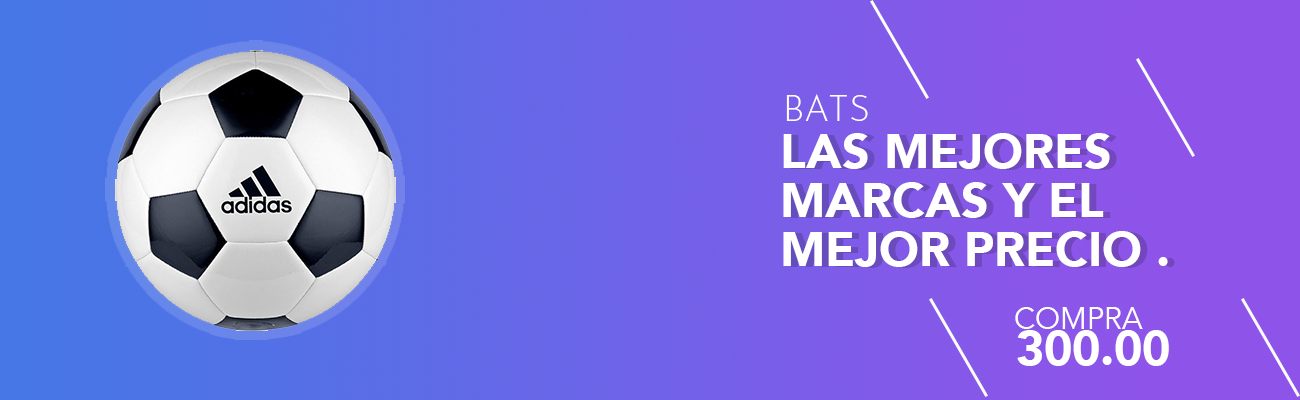
<style>
.page{position:relative;width:1300px;height:400px}
.page>*{position:absolute;margin:0}
.t1{font:36px "JosefinSans-Light";color:#ffffff;text-transform:uppercase}
.t2{font:48px/49px "Avenir-Black";color:#ffffff;text-transform:uppercase}
.t3{font:48px/49px "Avenir-Black";text-transform:uppercase}
.t4{font:30px "Avenir-Book";color:#ffffff;text-transform:uppercase}
.t5{font:48px "Avenir-Black";color:#ffffff;text-transform:uppercase}
</style>
<div class="page">
<p class="t1" style="left:786px;top:94px;width:82px;height:27px">Bats</p>
<p class="t2" style="left:783px;top:133px;width:385px;height:134px">Las mejores<br>marcas y el <br>mejor precio .</p>
<p class="t3" style="left:790px;top:134px;width:385px;height:134px">Las mejores<br>marcas y el <br>mejor precio .</p>
<p class="t4" style="left:1015px;top:307px;width:128px;height:22px">compra</p>
<p class="t5" style="left:1017px;top:330px;width:152px;height:36px">300.00</p>
</div>
